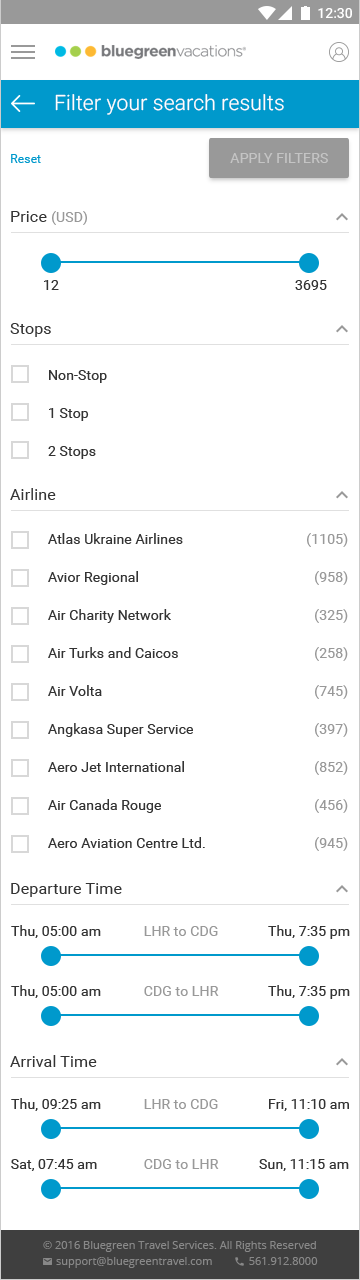
<style>
.page{position:relative;width:360px;height:1280px;background:#ffffff}
.page>*{position:absolute;margin:0}
.t1{font:21px "Roboto-Light";letter-spacing:0.01em;color:#ffffff}
.t2{font:12px "Roboto-Regular";letter-spacing:0.01em;color:#0099cc}
.t3{font:14px "Roboto-Regular";letter-spacing:0.01em;color:#c4c4c4;text-transform:uppercase}
.t4{font:16px "Roboto-Regular";letter-spacing:0.01em;color:#333333}
.t5{font:14px "Roboto-Regular";letter-spacing:0.01em;color:#999999}
.t6{font:14px "Roboto-Regular";letter-spacing:0.01em;color:#333333}
.t7{font:14px/38px "Roboto-Regular";letter-spacing:0.01em;color:#333333}
.t8{font:14px/38px "Roboto-Regular";letter-spacing:0.01em;color:#999999}
</style>
<div class="page">
<p class="t1" style="left:55px;top:94px;width:229px;height:21px">Filter your search results</p>
<p class="t2" style="left:11px;top:154px;width:30px;height:9px">Reset</p>
<p class="t3" style="left:230px;top:153px;width:98px;height:10px">apply filters</p>
<p class="t4" style="left:11px;top:211px;width:76px;height:14px">Price <span class="t5">(USD)</span></p>
<p class="t6" style="left:44px;top:280px;width:15px;height:10px">12</p>
<p class="t6" style="left:295px;top:280px;width:32px;height:10px">3695</p>
<p class="t4" style="left:10px;top:323px;width:41px;height:14px">Stops</p>
<p class="t7" style="left:48px;top:370px;width:59px;height:89px">Non-Stop<br>1 Stop<br>2 Stops</p>
<p class="t4" style="left:10px;top:488px;width:46px;height:12px">Airline</p>
<p class="t7" style="left:48px;top:533px;width:157px;height:315px">Atlas Ukraine Airlines<br>Avior Regional<br>Air Charity Network<br>Air Turks and Caicos<br>Air Volta<br>Angkasa Super Service<br>Aero Jet International<br>Air Canada Rouge<br>Aero Aviation Centre Ltd.</p>
<p class="t8" style="left:307px;top:533px;width:41px;height:318px;text-align:right">(1105)<br>(958)<br>(325)<br>(258)<br>(745)<br>(397)<br>(852)<br>(456)<br>(945)</p>
<p class="t4" style="left:11px;top:883px;width:111px;height:14px">Departure Time</p>
<p class="t6" style="left:11px;top:925px;width:90px;height:13px">Thu, 05:00 am</p>
<p class="t5" style="left:144px;top:926px;width:74px;height:10px">LHR to CDG</p>
<p class="t6" style="left:268px;top:925px;width:82px;height:14px">Thu, 7:35 pm</p>
<p class="t6" style="left:11px;top:985px;width:90px;height:13px">Thu, 05:00 am</p>
<p class="t5" style="left:144px;top:986px;width:75px;height:10px">CDG to LHR</p>
<p class="t6" style="left:268px;top:985px;width:82px;height:14px">Thu, 7:35 pm</p>
<p class="t4" style="left:10px;top:1055px;width:87px;height:12px">Arrival Time</p>
<p class="t6" style="left:11px;top:1098px;width:90px;height:13px">Thu, 09:25 am</p>
<p class="t5" style="left:144px;top:1099px;width:74px;height:10px">LHR to CDG</p>
<p class="t6" style="left:269px;top:1099px;width:80px;height:12px">Fri, 11:10 am</p>
<p class="t6" style="left:11px;top:1159px;width:86px;height:12px">Sat, 07:45 am</p>
<p class="t5" style="left:144px;top:1159px;width:75px;height:10px">CDG to LHR</p>
<p class="t6" style="left:259px;top:1159px;width:90px;height:12px">Sun, 11:15 am</p>
</div>
